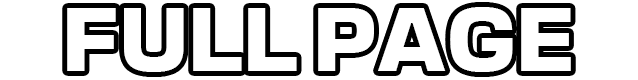
<style>
.page{position:relative;width:638px;height:80px;background:#ffffff}
.page>*{position:absolute;margin:0}
.t1{font:92px "Cobe-Heavy";letter-spacing:0.005em;color:#ffffff;text-transform:uppercase}
</style>
<div class="page">
<p class="t1" style="left:67px;top:7px;width:504px;height:65px">FULL PAGE</p>
</div>
